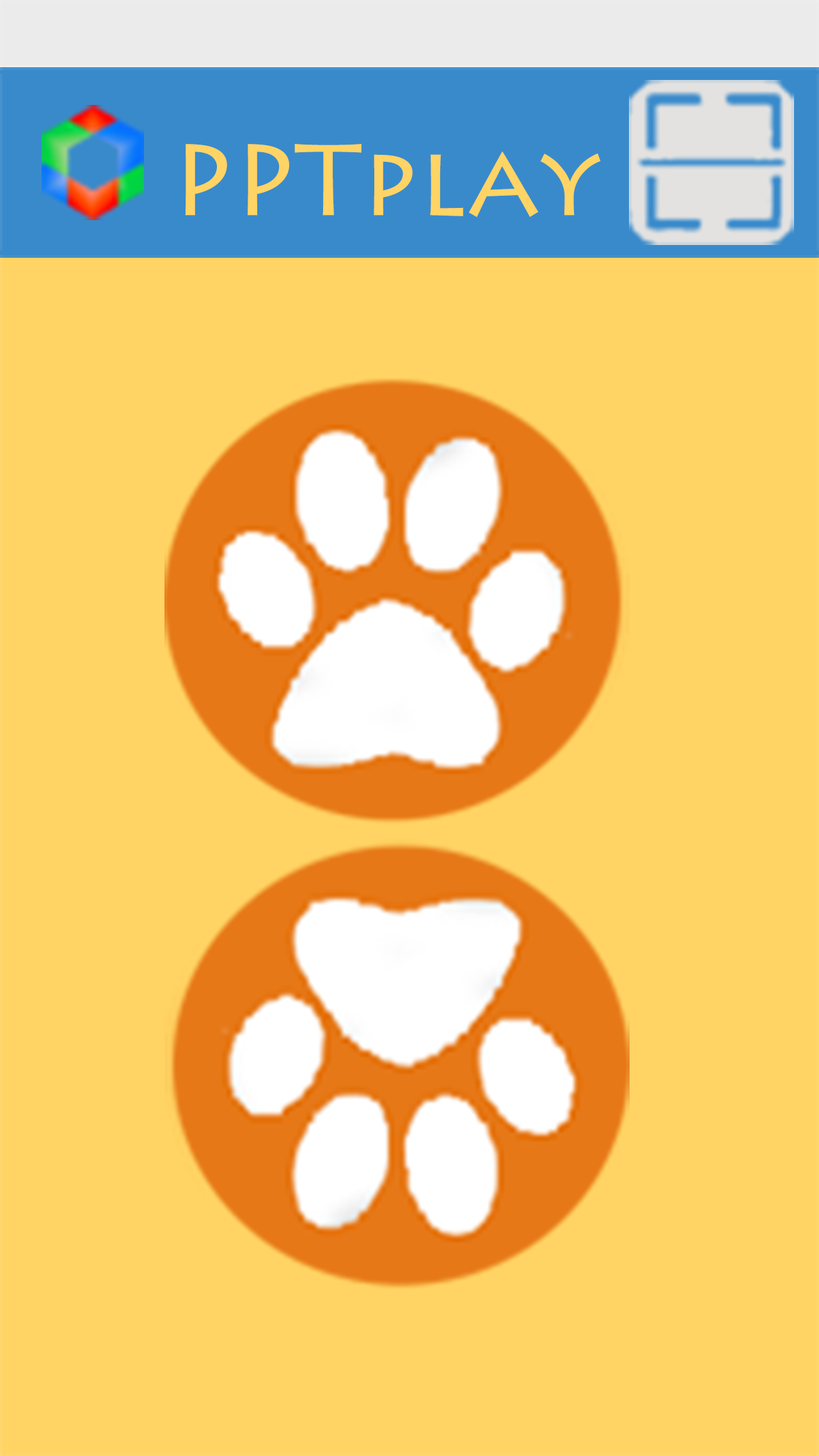
<style>
.page{position:relative;width:819px;height:1456px;background:#ffd464}
.page>*{position:absolute;margin:0}
.t1{font:101.3px "LithosPro-Regular";color:#ffd464}
</style>
<div class="page">
<p class="t1" style="left:185px;top:144px;width:416px;height:74px">PPTplay</p>
</div>
